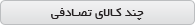
<style>
.page{position:relative;width:195px;height:25px}
.page>*{position:absolute;margin:0}
.t1{font:13.2px "BYekan";color:#231f20}
</style>
<div class="page">
<p class="t1" style="left:51px;top:8px;width:93px;height:12px">چند کـالای تصـادفی</p>
</div>
